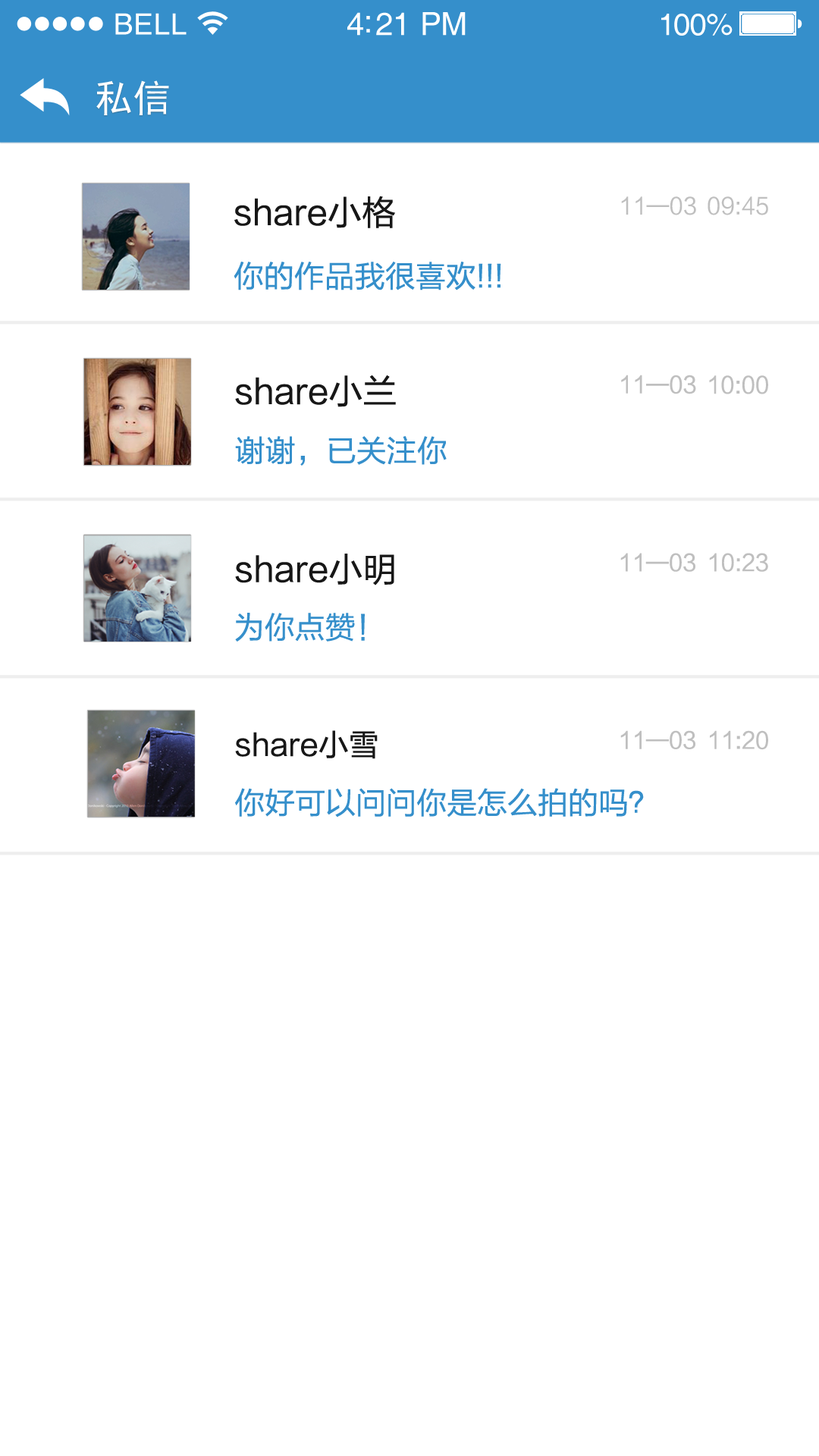
<style>
.page{position:relative;width:819px;height:1456px;background:#ffffff}
.page>*{position:absolute;margin:0}
.t1{font:29.3px "Helvetica";letter-spacing:0.02em;color:#ffffff}
.t2{font:31.8px "Helvetica";letter-spacing:-0.02em;color:#ffffff}
.t3{font:30.6px "Helvetica";letter-spacing:-0.02em;color:#ffffff}
.t4{font:37.9px "SimHei";color:#ffffff}
.t5{font:34.1px "FZLTHJW--GB1-0";color:#171717}
.t6{font:22.7px "FZLTHJW--GB1-0";color:#bfbfbf}
.t7{font:30.3px "FZLTHJW--GB1-0";color:#358fcb}
.t8{font:30.3px "FZLTHJW--GB1-0";color:#171717}
</style>
<div class="page">
<p class="t1" style="left:115px;top:13px;width:72px;height:22px">BELL</p>
<p class="t2" style="left:347px;top:12px;width:119px;height:24px">4:21 PM</p>
<p class="t3" style="left:661px;top:14px;width:72px;height:22px">100%</p>
<p class="t4" style="left:96px;top:80px;width:73px;height:35px">私信</p>
<p class="t5" style="left:234px;top:196px;width:161px;height:32px">share小格</p>
<p class="t6" style="left:621px;top:196px;width:75px;height:19px">11—03</p>
<p class="t6" style="left:708px;top:196px;width:60px;height:19px">09:45</p>
<p class="t7" style="left:234px;top:262px;width:267px;height:28px">你的作品我很喜欢!!!</p>
<p class="t5" style="left:235px;top:375px;width:161px;height:32px">share小兰</p>
<p class="t6" style="left:621px;top:375px;width:75px;height:19px">11—03</p>
<p class="t6" style="left:709px;top:375px;width:59px;height:19px">10:00</p>
<p class="t7" style="left:235px;top:436px;width:212px;height:30px">谢谢，已关注你</p>
<p class="t5" style="left:235px;top:554px;width:159px;height:31px">share小明</p>
<p class="t6" style="left:620px;top:553px;width:75px;height:19px">11—03</p>
<p class="t6" style="left:709px;top:553px;width:59px;height:19px">10:23</p>
<p class="t7" style="left:235px;top:613px;width:130px;height:29px">为你点赞！</p>
<p class="t8" style="left:235px;top:730px;width:143px;height:29px">share小雪</p>
<p class="t6" style="left:620px;top:730px;width:75px;height:19px">11—03</p>
<p class="t6" style="left:710px;top:730px;width:58px;height:20px">11:20</p>
<p class="t7" style="left:235px;top:788px;width:409px;height:29px">你好可以问问你是怎么拍的吗？</p>
</div>
